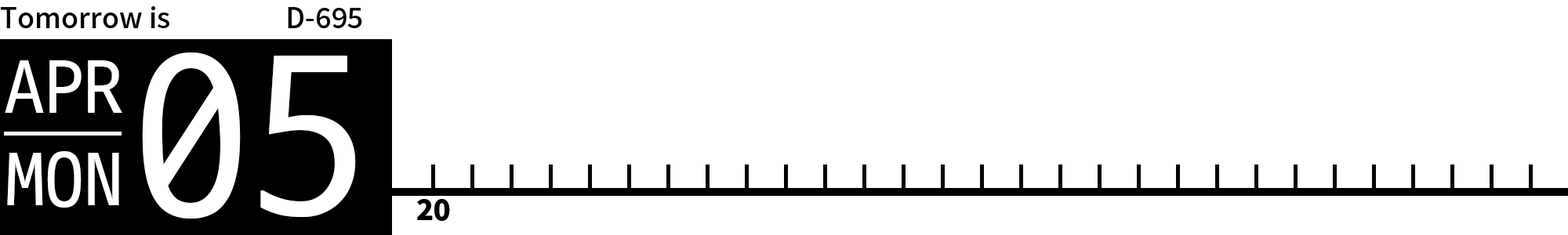
<style>
.page{position:relative;width:1568px;height:235px;background:#ffffff}
.page>*{position:absolute;margin:0}
.t1{font:28.2px "NotoSansKR-Medium";color:#000000}
.t2{font:235.2px "D2Codingligature";color:#ffffff}
.t3{font:78.4px "D2Codingligature";color:#ffffff}
.t4{font:28.2px "NotoSansKR-Black";color:#000000}
</style>
<div class="page">
<p class="t1" style="left:1px;top:6px;width:168px;height:22px">Tomorrow is</p>
<p class="t1" style="left:288px;top:7px;width:74px;height:21px">D-695</p>
<p class="t2" style="left:142px;top:53px;width:214px;height:166px">05</p>
<p class="t3" style="left:5px;top:60px;width:117px;height:53px">APR</p>
<p class="t3" style="left:7px;top:151px;width:112px;height:57px">MON</p>
<p class="t4" style="left:417px;top:199px;width:33px;height:22px">20</p>
</div>
